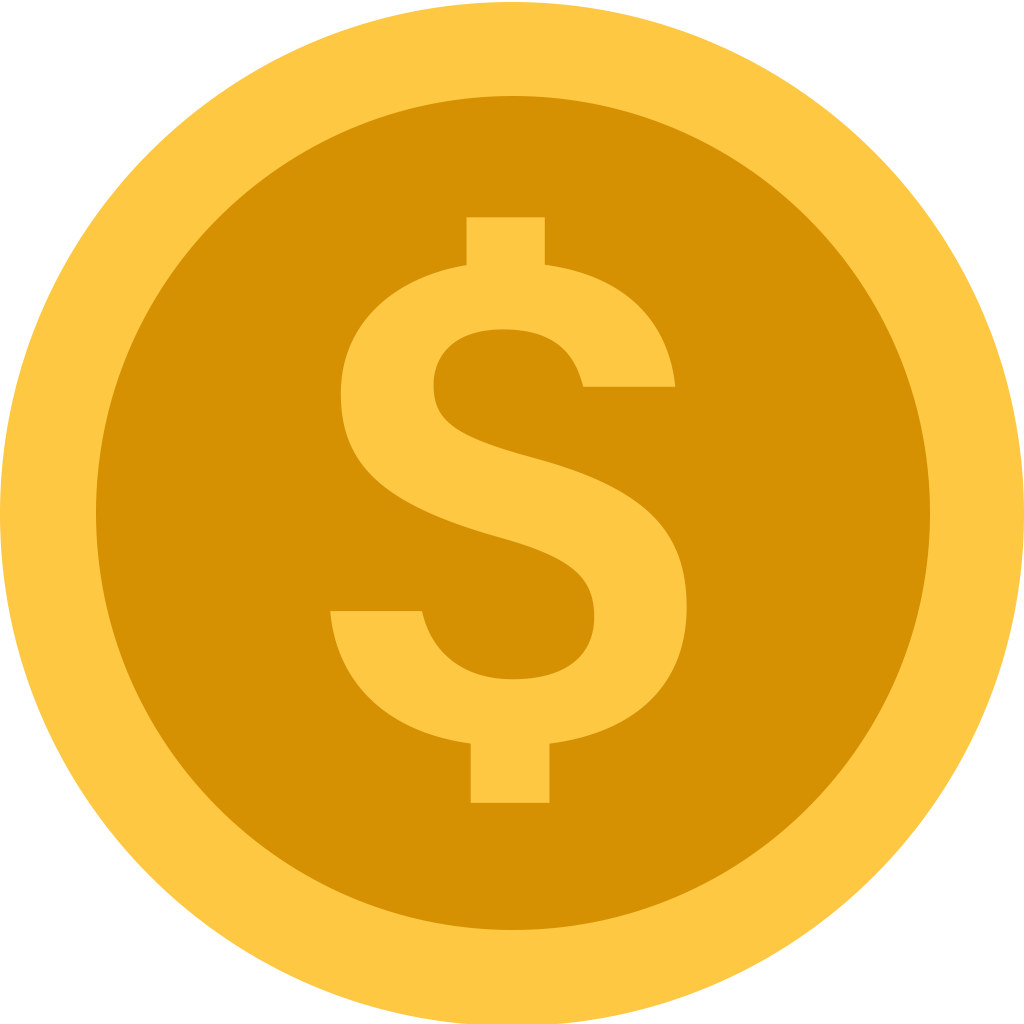
<style>
.page{position:relative;width:1024px;height:1024px;background:#d59102}
.page>*{position:absolute;margin:0}
.t1{font:720px "AcuminConcept-Semibold";letter-spacing:0.07em;color:#fec842;scale:1.03 1}
</style>
<div class="page">
<p class="t1" style="left:330px;top:217px;width:357px;height:586px">$</p>
</div>
